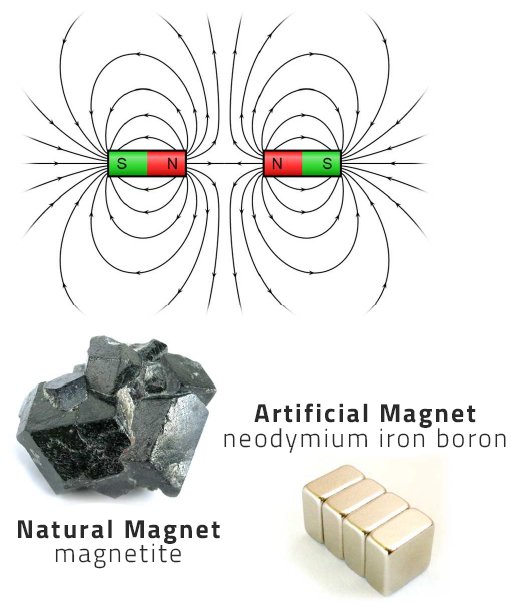
<style>
.page{position:relative;width:522px;height:603px;background:#ffffff}
.page>*{position:absolute;margin:0}
.t1{font:26px "TitilliumWeb-Bold";letter-spacing:0.08em;color:#2a2a2a}
.t2{font:26px "TitilliumWeb-Light";letter-spacing:0.08em;color:#2a2a2a}
</style>
<div class="page">
<p class="t1" style="left:254px;top:403px;width:222px;height:25px">Artificial Magnet</p>
<p class="t2" style="left:224px;top:428px;width:282px;height:25px">neodymium iron boron</p>
<p class="t1" style="left:18px;top:519px;width:202px;height:25px">Natural Magnet</p>
<p class="t2" style="left:55px;top:543px;width:126px;height:26px">magnetite</p>
</div>
